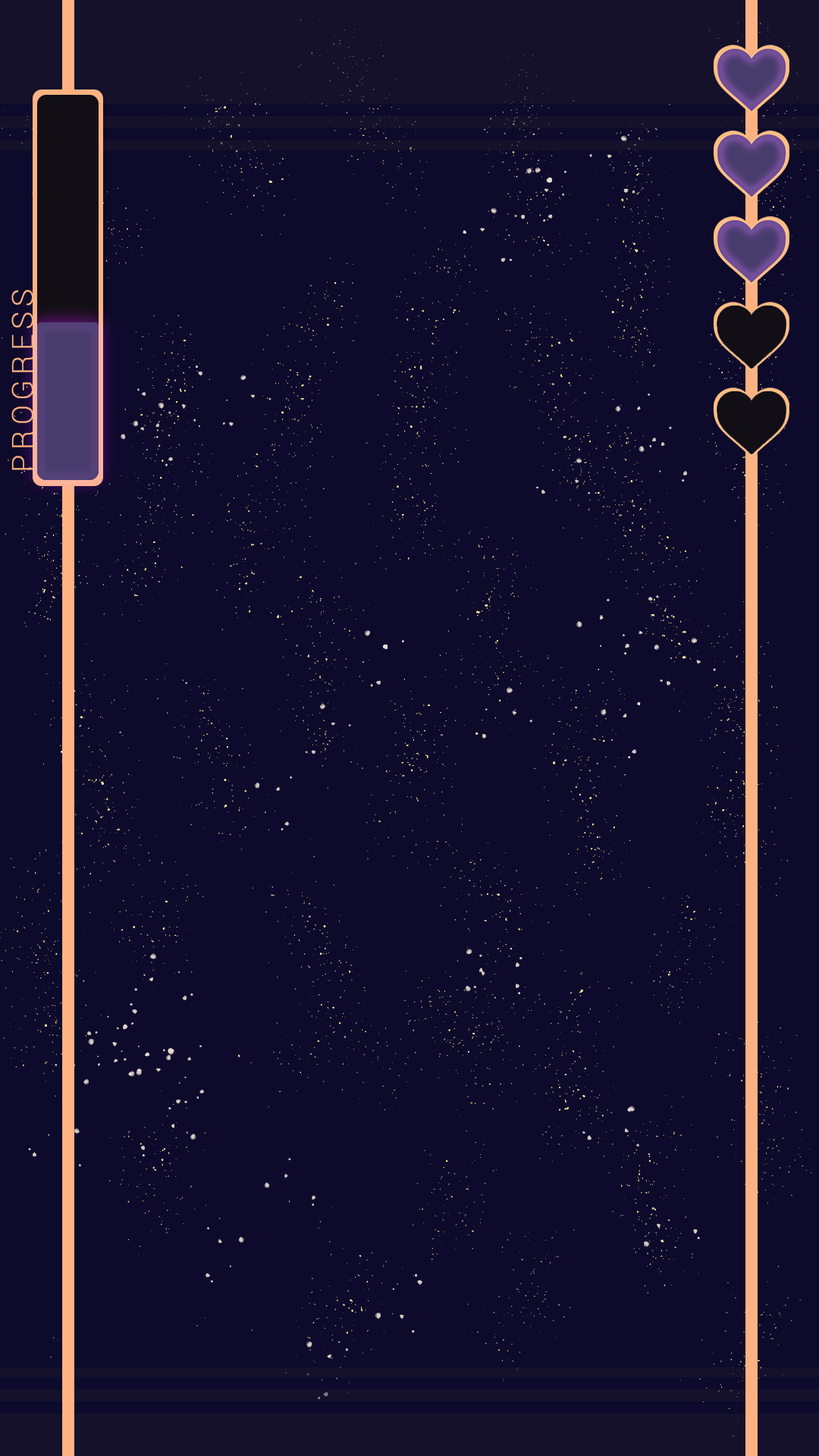
<style>
.page{position:relative;width:819px;height:1456px;background:#0e0a2b}
.page>*{position:absolute;margin:0}
.t1{font:28.4px "Roboto-Thin";letter-spacing:0.17em;color:#feb282;font-weight:bold}
</style>
<div class="page">
<p class="t1" style="left:11px;top:290px;width:22px;height:180px;rotate:-90deg">PROGRESS</p>
</div>
